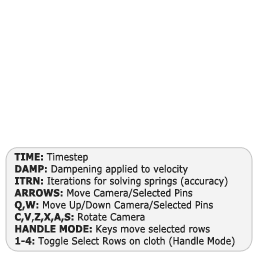
<style>
.page{position:relative;width:256px;height:256px;background:#ffffff}
.page>*{position:absolute;margin:0}
.t1{font:10px "Verdana";color:#262626;scale:0.9 1}
.t2{font:10px "Verdana-Bold";color:#262626;scale:0.9 1}
</style>
<div class="page">
<p class="t1" style="left:14px;top:153px;width:221px;height:94px"><span class="t2">TIME: </span>Timestep<br><span class="t2">DAMP: </span>Dampening applied to velocity<br><span class="t2">ITRN:</span> Iterations for solving springs (accuracy)<br><span class="t2">ARROWS:</span> Move Camera/Selected Pins<br><span class="t2">Q,W: </span>Move Up/Down Camera/Selected Pins<br><span class="t2">C,V</span>,<span class="t2">Z,X,A,S: </span>Rotate Camera<br><span class="t2">HANDLE MODE: </span>Keys move selected rows<br><span class="t2">1-4: </span>Toggle Select Rows on cloth (Handle Mode)</p>
</div>
